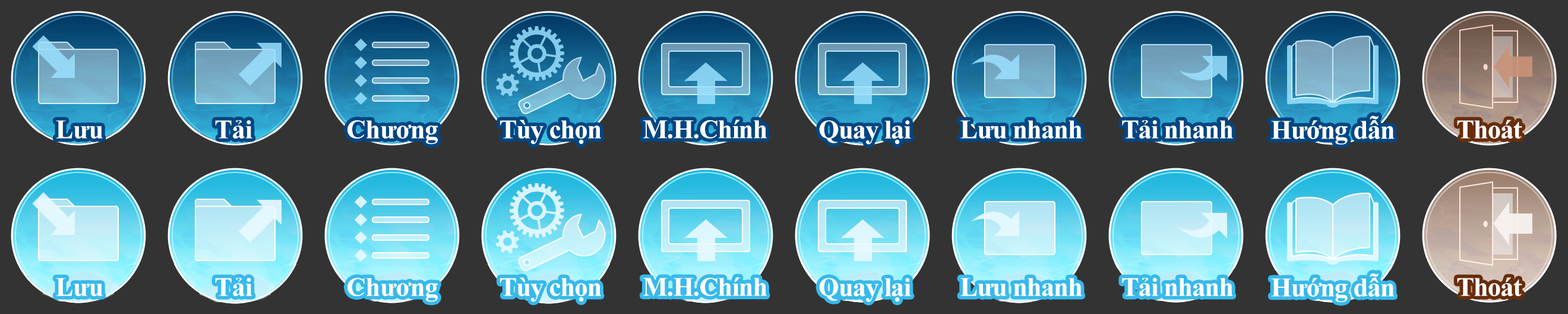
<style>
.page{position:relative;width:1568px;height:314px;background:#333333}
.page>*{position:absolute;margin:0}
.t1{font:26.7px "TimesNewRomanPS-BoldMT";letter-spacing:-0.01em;color:#ffffff}
.t2{font:26.7px "TimesNewRomanPS-BoldMT";letter-spacing:-0.025em;color:#ffffff}
</style>
<div class="page">
<p class="t1" style="left:56px;top:120px;width:47px;height:18px">Lưu</p>
<p class="t1" style="left:215px;top:120px;width:37px;height:18px">Tải</p>
<p class="t1" style="left:347px;top:120px;width:91px;height:24px">Chương</p>
<p class="t2" style="left:500px;top:119px;width:101px;height:25px">Tùy chọn</p>
<p class="t2" style="left:643px;top:119px;width:124px;height:19px">M.H.Chính</p>
<p class="t2" style="left:819px;top:120px;width:92px;height:24px">Quay lại</p>
<p class="t2" style="left:960px;top:120px;width:122px;height:18px">Lưu nhanh</p>
<p class="t2" style="left:1122px;top:120px;width:111px;height:18px">Tải nhanh</p>
<p class="t2" style="left:1271px;top:115px;width:124px;height:29px">Hướng dẫn</p>
<p class="t2" style="left:1457px;top:119px;width:65px;height:19px">Thoát</p>
<p class="t1" style="left:56px;top:277px;width:47px;height:19px">Lưu</p>
<p class="t1" style="left:215px;top:277px;width:37px;height:19px">Tải</p>
<p class="t1" style="left:347px;top:277px;width:91px;height:25px">Chương</p>
<p class="t2" style="left:500px;top:277px;width:101px;height:25px">Tùy chọn</p>
<p class="t2" style="left:643px;top:277px;width:124px;height:19px">M.H.Chính</p>
<p class="t2" style="left:819px;top:277px;width:92px;height:25px">Quay lại</p>
<p class="t2" style="left:960px;top:277px;width:122px;height:19px">Lưu nhanh</p>
<p class="t2" style="left:1122px;top:277px;width:111px;height:19px">Tải nhanh</p>
<p class="t2" style="left:1271px;top:273px;width:124px;height:29px">Hướng dẫn</p>
<p class="t2" style="left:1457px;top:277px;width:65px;height:19px">Thoát</p>
</div>
